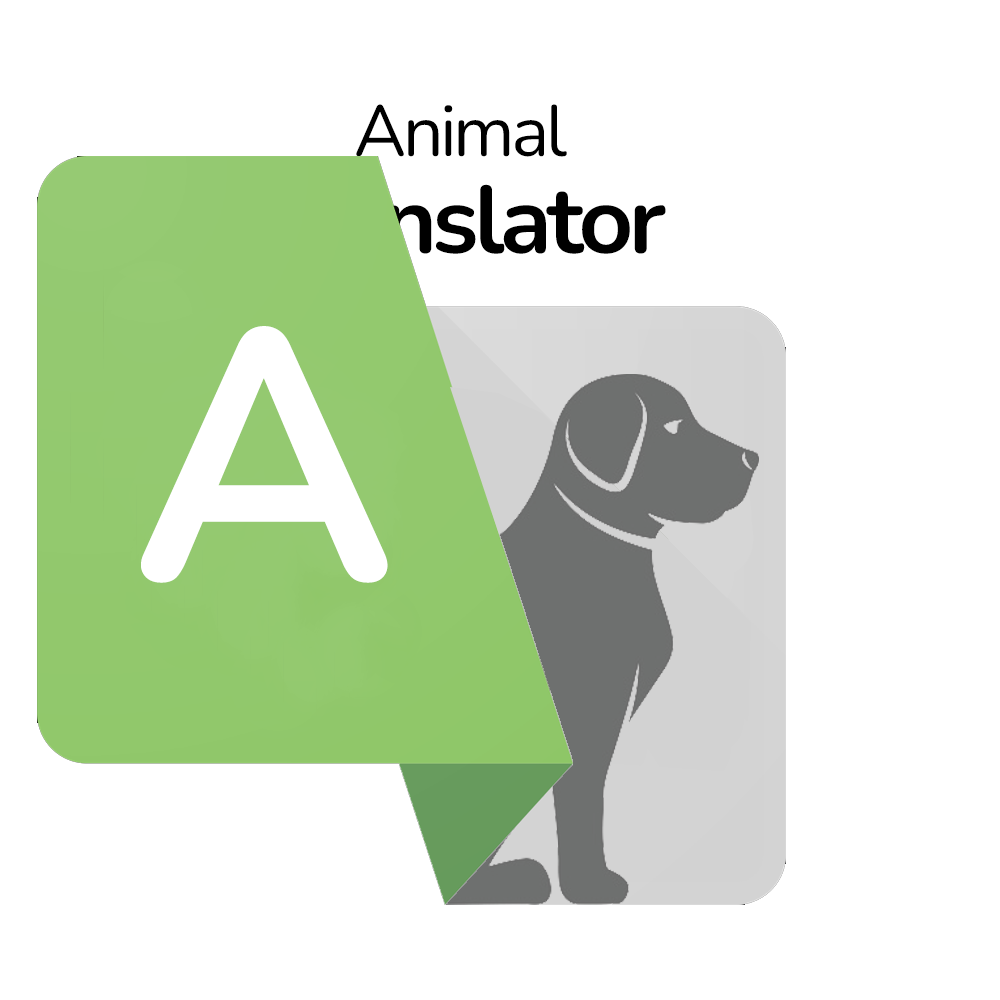
<style>
.page{position:relative;width:1000px;height:1000px;background:#ffffff}
.page>*{position:absolute;margin:0}
.t1{font:72px "Nunito-Regular";letter-spacing:-0.05em;color:#000000}
.t2{font:95.3px "Nunito-Bold";letter-spacing:-0.05em;color:#000000}
.t3{font:355.5px "Nunito-Bold";letter-spacing:-0.05em;color:#ffffff}
</style>
<div class="page">
<p class="t1" style="left:356px;top:104px;width:211px;height:53px">Animal</p>
<p class="t2" style="left:254px;top:184px;width:412px;height:70px">Translator</p>
<p class="t3" style="left:141px;top:326px;width:247px;height:257px">A</p>
</div>
